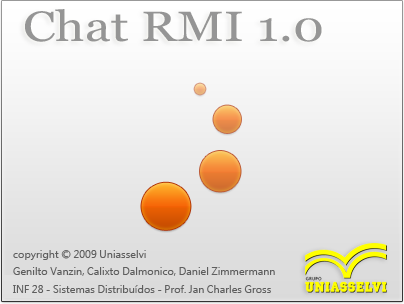
<style>
.page{position:relative;width:404px;height:304px}
.page>*{position:absolute;margin:0}
.t1{font:42.3px "Vani";letter-spacing:0.005em;color:#959595;scale:1.2 1}
.t2{font:10px/17.2px "MicrosoftJhengHeiRegular";letter-spacing:0.005em;color:#5e5e5e}
</style>
<div class="page">
<p class="t1" style="left:25px;top:9px;width:297px;height:33px">Chat RMI 1.0</p>
<p class="t2" style="left:13px;top:250px;width:262px;height:43px">copyright © 2009 Uniasselvi<br>Genilto Vanzin, Calixto Dalmonico, Daniel Zimmermann<br>INF 28 - Sistemas Distribuídos - Prof. Jan Charles Gross</p>
</div>
